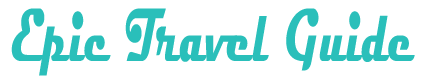
<style>
.page{position:relative;width:432px;height:82px;background:#ffffff}
.page>*{position:absolute;margin:0}
.t1{font:76.3px "Magneto-Bold";color:#2abfba;scale:0.54 1}
</style>
<div class="page">
<p class="t1" style="left:11px;top:8px;width:404px;height:68px">Epic Travel Guide</p>
</div>
